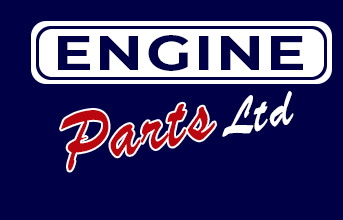
<style>
.page{position:relative;width:343px;height:220px;background:#000046}
.page>*{position:absolute;margin:0}
.t1{font:48px "Montserrat-Bold";letter-spacing:0.045em;color:#000046;scale:1.23 1}
.t2{font:52px "BrushScript";letter-spacing:0.045em;color:#ffffff}
.t3{font:76px "BrushScript";letter-spacing:0.045em;color:#ba060f;scale:0.92 1}
</style>
<div class="page">
<p class="t1" style="left:58px;top:35px;width:245px;height:36px">ENGINE</p>
<p class="t2" style="left:222px;top:91px;width:72px;height:46px;rotate:-13deg">Ltd</p>
<p class="t3" style="left:61px;top:103px;width:155px;height:68px;rotate:-12deg">Parts</p>
</div>
